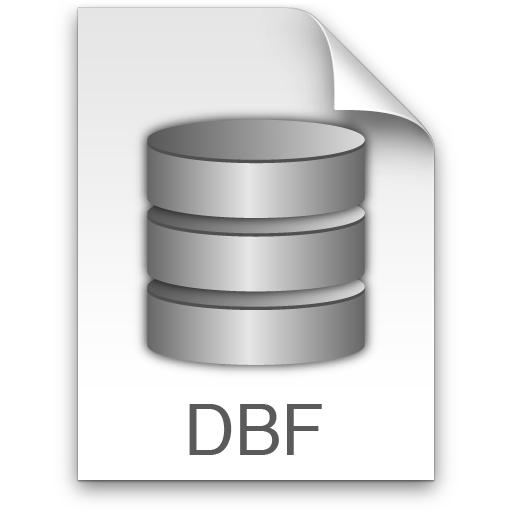
<style>
.page{position:relative;width:512px;height:512px;background:#ffffff}
.page>*{position:absolute;margin:0}
.t1{font:70px "Helvetica";color:#5a5a5a}
</style>
<div class="page">
<p class="t1" style="left:189px;top:404px;width:133px;height:51px">DBF</p>
</div>
